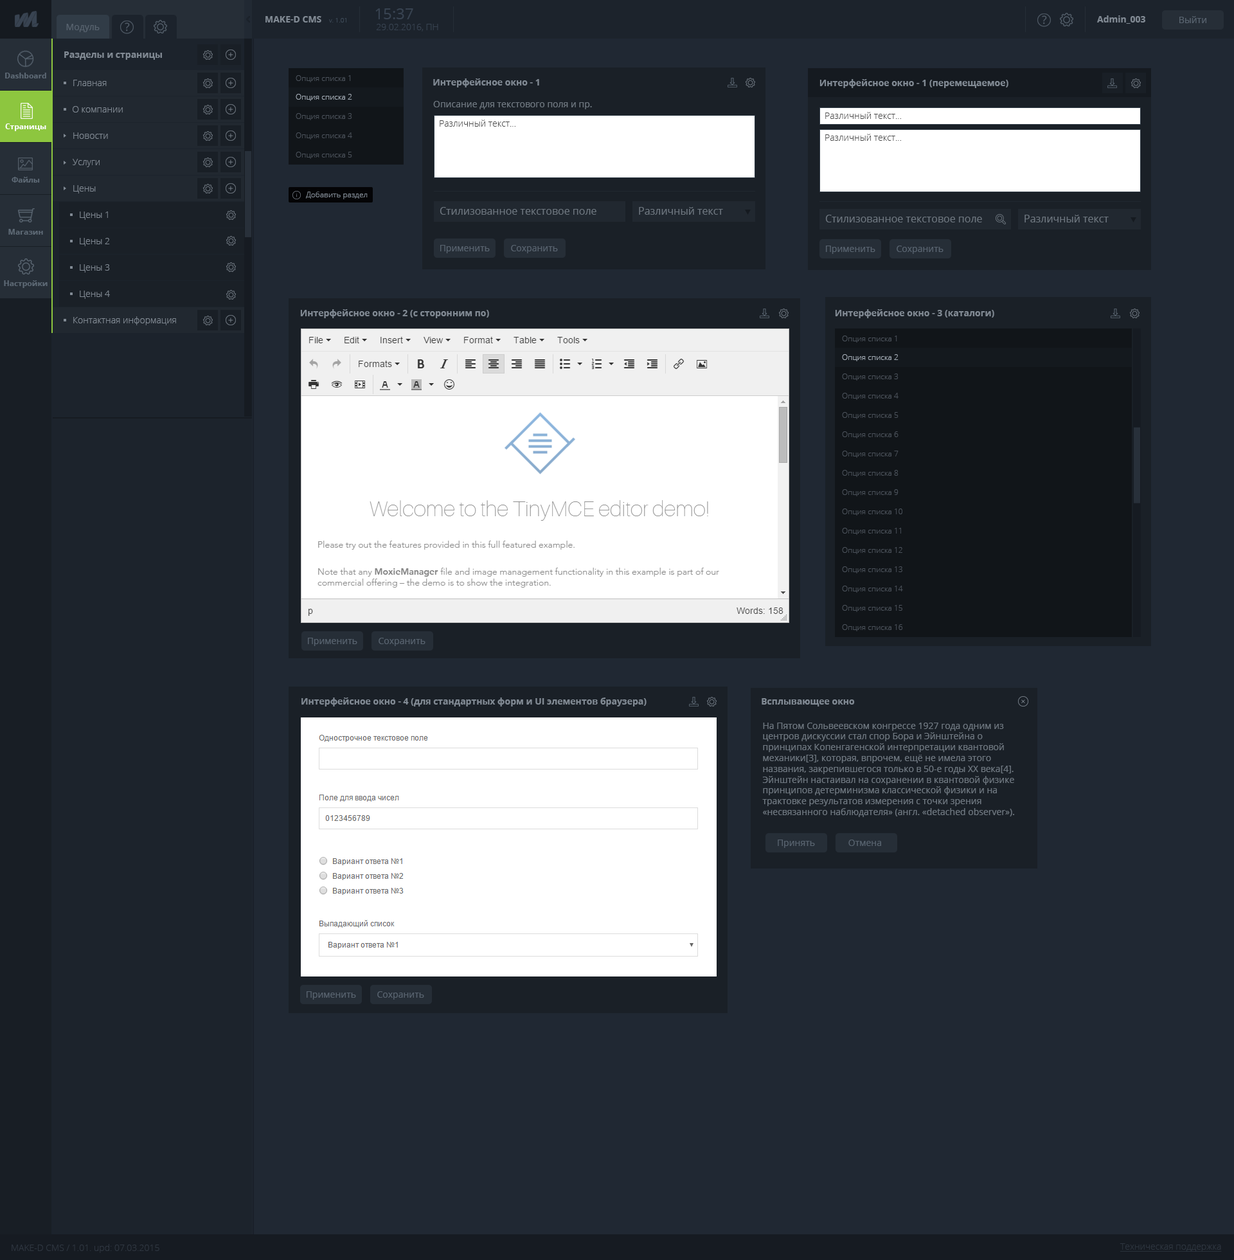
<style>
.page{position:relative;width:1234px;height:1260px;background:#202833}
.page>*{position:absolute;margin:0}
.t1{font:9px "OpenSans-Bold";color:#818a94}
.t2{font:15.4px "OpenSans";color:#384351}
.t3{font:9px "OpenSans";color:#58636f}
.t4{font:6.4px "OpenSans-Light";color:#3e4a58}
.t5{font:9px "OpenSans-Light";color:#384351}
.t6{font:7.7px "OpenSans-Bold";color:#606b77}
.t7{font:7.7px "OpenSans-Light";color:#4b525b}
.t8{font:9px "OpenSans-Light";color:#818a94}
.t9{font:7.7px "OpenSans-Light";color:#a5aeb8}
.t10{font:9px "OpenSans";color:#6e7780}
.t11{font:9px "OpenSans-Light";color:#494949}
.t12{font:7.7px "OpenSans-Bold";color:#ffffff}
.t13{font:7.7px "OpenSans-Bold";color:#5e6a76}
.t14{font:7.7px "OpenSans-Light";color:#818a94}
.t15{font:10.3px "OpenSans";color:#6e7780}
.t16{font:9px "OpenSans-Light";color:#2e3640}
.t17{font:9px "OpenSans-Light";color:#2e3640;text-decoration:underline}
</style>
<div class="page">
<p class="t1" style="left:266px;top:16px;width:55px;height:6px">MAKE-D CMS</p>
<p class="t2" style="left:375px;top:8px;width:38px;height:11px">15:37</p>
<p class="t1" style="left:1097px;top:15px;width:49px;height:9px">Admin_003</p>
<p class="t3" style="left:1180px;top:16px;width:27px;height:7px">Выйти</p>
<p class="t3" style="left:66px;top:24px;width:34px;height:8px">Модуль</p>
<p class="t4" style="left:329px;top:18px;width:17px;height:4px">v. 1.01</p>
<p class="t5" style="left:376px;top:24px;width:62px;height:8px">29.02.2016, ПН</p>
<p class="t1" style="left:64px;top:51px;width:98px;height:9px">Разделы и страницы</p>
<p class="t6" style="left:5px;top:73px;width:41px;height:5px">Dashboard</p>
<p class="t7" style="left:296px;top:75px;width:55px;height:7px">Опция списка 1</p>
<p class="t8" style="left:73px;top:80px;width:34px;height:6px">Главная</p>
<p class="t1" style="left:433px;top:78px;width:106px;height:9px">Интерфейсное окно - 1</p>
<p class="t1" style="left:820px;top:79px;width:189px;height:9px">Интерфейсное окно - 1 (перемещаемое)</p>
<p class="t9" style="left:296px;top:94px;width:56px;height:7px">Опция списка 2</p>
<p class="t10" style="left:433px;top:101px;width:159px;height:8px">Описание для текстового поля и пр.</p>
<p class="t8" style="left:73px;top:106px;width:50px;height:7px">О компании</p>
<p class="t7" style="left:296px;top:113px;width:56px;height:7px">Опция списка 3</p>
<p class="t11" style="left:825px;top:112px;width:76px;height:7px">Различный текст...</p>
<p class="t12" style="left:5px;top:123px;width:41px;height:8px">Страницы</p>
<p class="t11" style="left:440px;top:120px;width:76px;height:7px">Различный текст...</p>
<p class="t8" style="left:73px;top:132px;width:35px;height:7px">Новости</p>
<p class="t7" style="left:296px;top:132px;width:56px;height:8px">Опция списка 4</p>
<p class="t11" style="left:825px;top:134px;width:76px;height:7px">Различный текст...</p>
<p class="t8" style="left:73px;top:159px;width:27px;height:8px">Услуги</p>
<p class="t7" style="left:296px;top:152px;width:56px;height:7px">Опция списка 5</p>
<p class="t13" style="left:12px;top:177px;width:28px;height:6px">Файлы</p>
<p class="t8" style="left:73px;top:185px;width:23px;height:9px">Цены</p>
<p class="t14" style="left:306px;top:192px;width:62px;height:7px">Добавить раздел</p>
<p class="t15" style="left:440px;top:207px;width:157px;height:8px">Стилизованное текстовое поле</p>
<p class="t15" style="left:639px;top:207px;width:84px;height:8px">Различный текст</p>
<p class="t8" style="left:80px;top:212px;width:28px;height:8px">Цены 1</p>
<p class="t15" style="left:825px;top:215px;width:157px;height:7px">Стилизованное текстовое поле</p>
<p class="t15" style="left:1025px;top:215px;width:84px;height:7px">Различный текст</p>
<p class="t13" style="left:8px;top:229px;width:35px;height:6px">Магазин</p>
<p class="t8" style="left:80px;top:238px;width:30px;height:8px">Цены 2</p>
<p class="t3" style="left:440px;top:245px;width:50px;height:8px">Применить</p>
<p class="t3" style="left:511px;top:245px;width:47px;height:8px">Сохранить</p>
<p class="t3" style="left:826px;top:246px;width:50px;height:8px">Применить</p>
<p class="t3" style="left:897px;top:246px;width:47px;height:8px">Сохранить</p>
<p class="t8" style="left:80px;top:264px;width:30px;height:9px">Цены 3</p>
<p class="t13" style="left:4px;top:280px;width:44px;height:8px">Настройки</p>
<p class="t8" style="left:80px;top:291px;width:30px;height:8px">Цены 4</p>
<p class="t8" style="left:73px;top:316px;width:103px;height:9px">Контактная информация</p>
<p class="t1" style="left:300px;top:309px;width:189px;height:9px">Интерфейсное окно - 2 (с сторонним по)</p>
<p class="t1" style="left:835px;top:309px;width:160px;height:9px">Интерфейсное окно - 3 (каталоги)</p>
<p class="t7" style="left:842px;top:336px;width:55px;height:7px">Опция списка 1</p>
<p class="t9" style="left:842px;top:354px;width:57px;height:7px">Опция списка 2</p>
<p class="t7" style="left:842px;top:374px;width:57px;height:7px">Опция списка 3</p>
<p class="t7" style="left:842px;top:393px;width:57px;height:7px">Опция списка 4</p>
<p class="t7" style="left:842px;top:412px;width:57px;height:7px">Опция списка 5</p>
<p class="t7" style="left:842px;top:431px;width:57px;height:7px">Опция списка 6</p>
<p class="t7" style="left:842px;top:451px;width:57px;height:7px">Опция списка 7</p>
<p class="t7" style="left:842px;top:470px;width:57px;height:7px">Опция списка 8</p>
<p class="t7" style="left:842px;top:489px;width:57px;height:7px">Опция списка 9</p>
<p class="t7" style="left:842px;top:509px;width:61px;height:7px">Опция списка 10</p>
<p class="t7" style="left:842px;top:528px;width:59px;height:7px">Опция списка 11</p>
<p class="t7" style="left:842px;top:547px;width:61px;height:7px">Опция списка 12</p>
<p class="t7" style="left:842px;top:566px;width:61px;height:7px">Опция списка 13</p>
<p class="t7" style="left:842px;top:586px;width:61px;height:7px">Опция списка 14</p>
<p class="t7" style="left:842px;top:605px;width:61px;height:7px">Опция списка 15</p>
<p class="t7" style="left:842px;top:624px;width:61px;height:7px">Опция списка 16</p>
<p class="t3" style="left:308px;top:638px;width:49px;height:8px">Применить</p>
<p class="t3" style="left:379px;top:638px;width:47px;height:8px">Сохранить</p>
<p class="t1" style="left:302px;top:698px;width:345px;height:8px">Интерфейсное окно - 4 (для стандартных форм и UI элементов браузера)</p>
<p class="t1" style="left:762px;top:698px;width:93px;height:8px">Всплывающее окно</p>
<p class="t10" style="left:762px;top:723px;width:252px;height:94px">На Пятом Сольвеевском конгрессе 1927 года одним из центров дискуссии стал спор Бора и Эйнштейна о принципах Копенгагенской интерпретации квантовой механики[3], которая, впрочем, ещё не имела этого названия, закрепившегося только в 50-е годы XX века[4]. Эйнштейн настаивал на сохранении в квантовой физике принципов детерминизма классической физики и на трактовке результатов измерения с точки зрения «несвязанного наблюдателя» (англ. «detached observer»).</p>
<p class="t3" style="left:778px;top:840px;width:37px;height:8px">Принять</p>
<p class="t3" style="left:849px;top:840px;width:32px;height:6px">Отмена</p>
<p class="t3" style="left:307px;top:991px;width:49px;height:9px">Применить</p>
<p class="t3" style="left:377px;top:991px;width:47px;height:9px">Сохранить</p>
<p class="t16" style="left:12px;top:1244px;width:147px;height:9px">MAKE-D CMS / 1.01. upd: 07.03.2015</p>
<p class="t17" style="left:1120px;top:1243px;width:102px;height:9px">Техническая поддержка</p>
</div>
